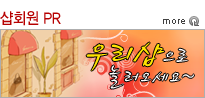
<style>
.page{position:relative;width:205px;height:98px;background:#ffffff}
.page>*{position:absolute;margin:0}
.t1{font:15.9px "YDIYGO330";letter-spacing:-0.025em;color:#b60000;scale:0.91 1}
.t2{font:10px "ArialMT";color:#424242}
.t3{font:24px/20px "SJSoju1";letter-spacing:-0.05em;color:#ffffff}
.t4{font:39px/20px "SJSoju1";letter-spacing:-0.05em;color:#ffe400}
</style>
<div class="page">
<p class="t1" style="left:0px;top:11px;width:61px;height:15px">샵회원 PR</p>
<p class="t2" style="left:163px;top:19px;width:22px;height:5px">more</p>
<p class="t3" style="left:86px;top:42px;width:108px;height:47px;text-align:right"><span class="t4">우리샵</span>으로 <br>놀러오세요~</p>
</div>
